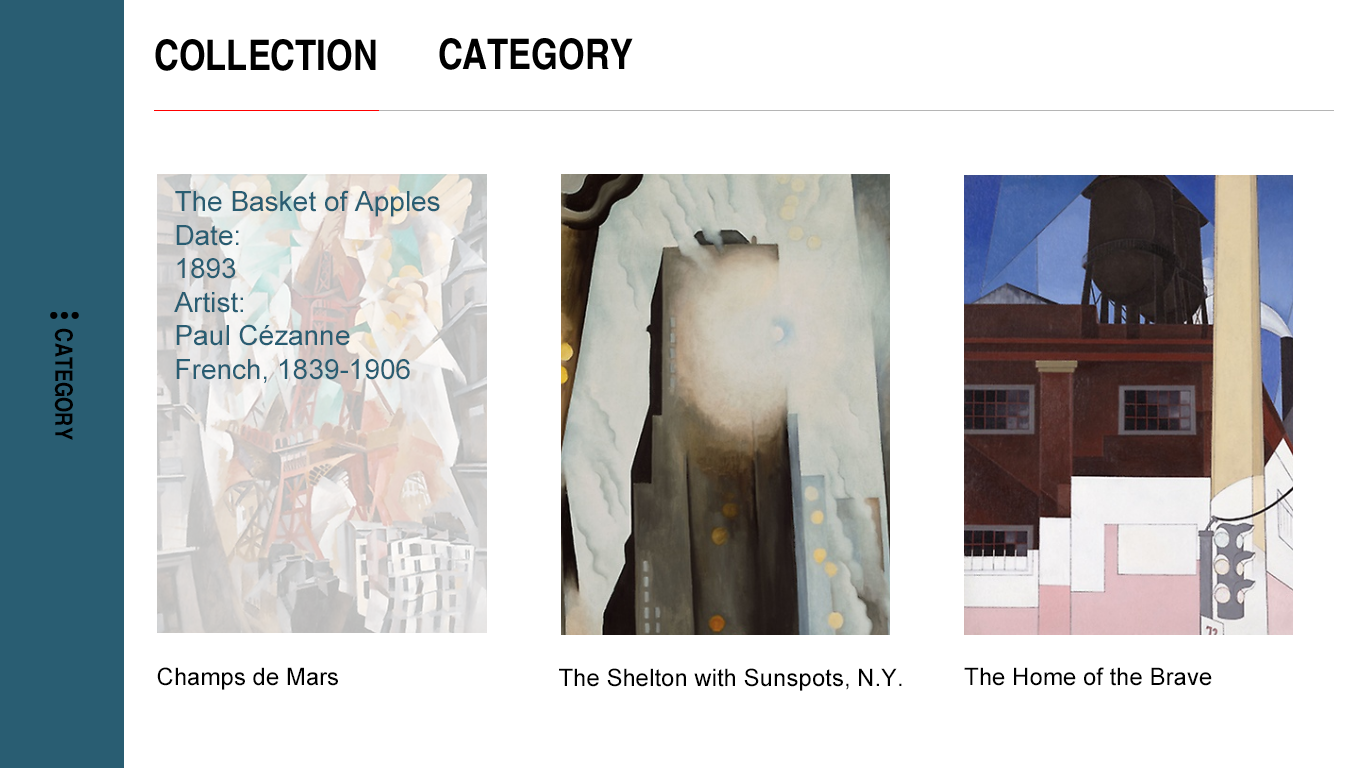
<style>
.page{position:relative;width:1366px;height:768px;background:#ffffff}
.page>*{position:absolute;margin:0}
.t1{font:28px "ArialMT";color:#295d72}
.t2{font:24px "ArialMT";color:#000000}
</style>
<div class="page">
<p class="t1" style="left:174px;top:190px;width:266px;height:194px">The Basket of Apples <br>Date:<br>1893<br>Artist:<br>Paul Cézanne<br>French, 1839-1906</p>
<p class="t2" style="left:157px;top:667px;width:181px;height:23px">Champs de Mars</p>
<p class="t2" style="left:559px;top:668px;width:343px;height:23px">The Shelton with Sunspots, N.Y.</p>
<p class="t2" style="left:964px;top:667px;width:248px;height:19px">The Home of the Brave</p>
</div>
